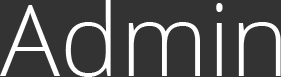
<style>
.page{position:relative;width:281px;height:77px;background:#333333}
.page>*{position:absolute;margin:0}
.t1{font:100px "OpenSans-Light";color:#ffffff}
</style>
<div class="page">
<p class="t1" style="left:0px;top:0px;width:281px;height:77px">Admin</p>
</div>
